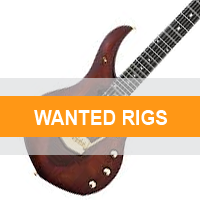
<style>
.page{position:relative;width:200px;height:200px;background:#ffffff}
.page>*{position:absolute;margin:0}
.t1{font:19.7px "Arial-BoldMT";color:#ffffff;scale:0.96 1}
</style>
<div class="page">
<p class="t1" style="left:34px;top:110px;width:133px;height:15px">WANTED RIGS</p>
</div>
